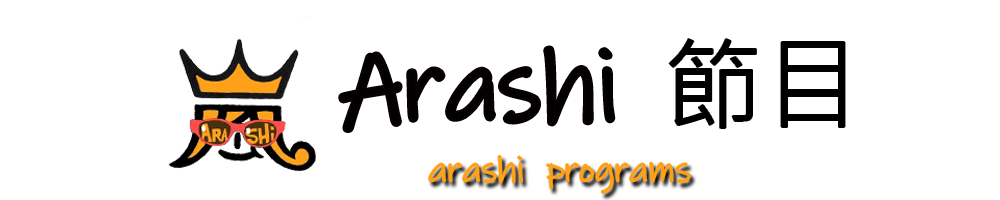
<style>
.page{position:relative;width:1000px;height:200px;background:#ffffff}
.page>*{position:absolute;margin:0}
.t1{font:100px "MicrosoftJhengHeiRegular";color:#000000}
.t2{font:100px "InkFree";color:#000000}
.t3{font:36px "InkFree";color:#fea018}
</style>
<div class="page">
<p class="t1" style="left:669px;top:39px;width:176px;height:89px">節目</p>
<p class="t2" style="left:341px;top:48px;width:272px;height:82px">Arashi</p>
<p class="t3" style="left:429px;top:155px;width:261px;height:38px">arashi  programs</p>
</div>
